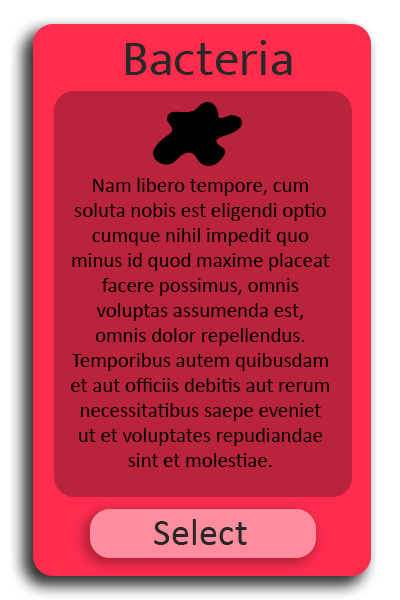
<style>
.page{position:relative;width:400px;height:600px;background:#b9243c}
.page>*{position:absolute;margin:0}
.t1{font:50px "Mukta-Regular";color:#282828}
.t2{font:20.8px "Calibri";color:#000000}
</style>
<div class="page">
<p class="t1" style="left:126px;top:40px;width:166px;height:35px">Bacteria</p>
<p class="t2" style="left:71px;top:178px;width:259px;height:289px;text-align:center">Nam libero tempore, cum soluta nobis est eligendi optio cumque nihil impedit quo minus id quod maxime placeat facere possimus, omnis voluptas assumenda est, omnis dolor repellendus. Temporibus autem quibusdam et aut officiis debitis aut rerum necessitatibus saepe eveniet ut et voluptates repudiandae sint et molestiae.                  earum rerum hic tenetur a sapiente delectus, ut aut reiciendis voluptatibus maiores alias consequatur aut perferendis doloribus asperiores repellat.</p>
</div>
